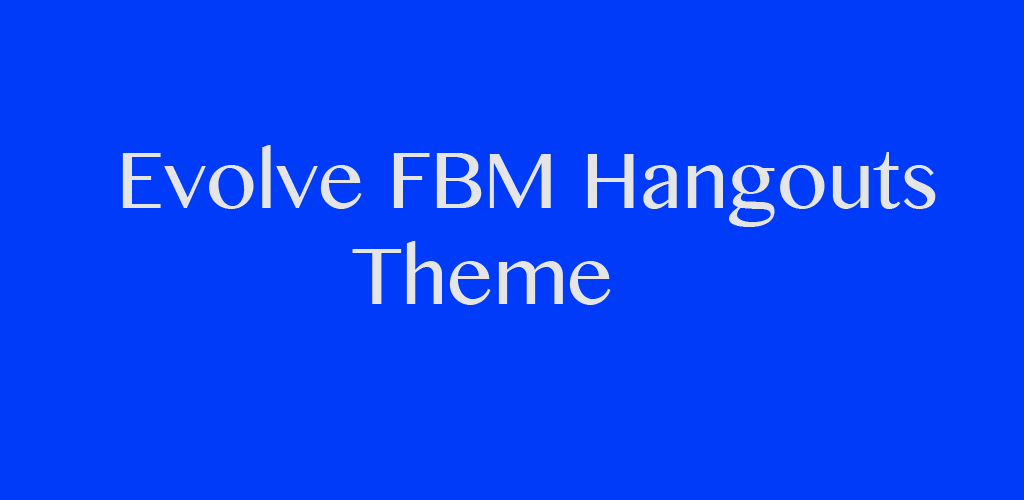
<style>
.page{position:relative;width:1024px;height:500px;background:#003bfa}
.page>*{position:absolute;margin:0}
.t1{font:80px "MyanmarMN";color:#e6e6e6}
</style>
<div class="page">
<p class="t1" style="left:122px;top:145px;width:814px;height:160px">Evolve FBM Hangouts <br>          Theme</p>
</div>
